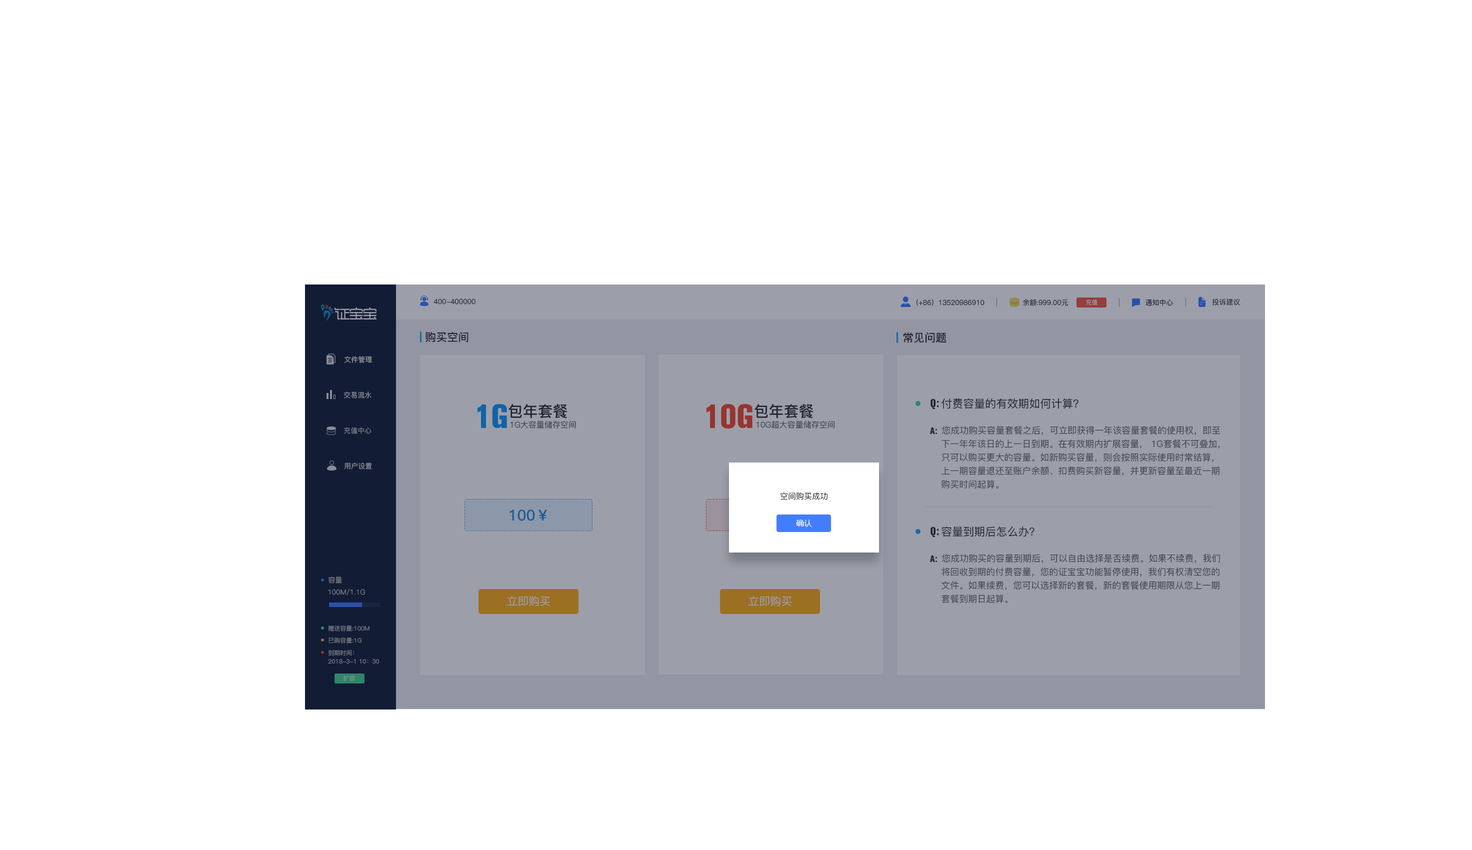
<style>
.page{position:relative;width:1472px;height:850px;background:#ffffff}
.page>*{position:absolute;margin:0}
.t1{font:7px "PingFang-SC-Medium";color:#232730}
.t2{font:6px "PingFang-SC-Medium";color:#9c9faa}
.t3{font:11px "PingFang-SC-Bold";color:#333333}
.t4{font:7px "PingFang-SC-Bold";color:#888b98}
.t5{font:7px "PingFang-SC-Medium";color:#898b98}
.t6{font:11.1px "AkzidenzGroteskBQ-XBdCnd";color:#333333}
.t7{font:11px "PingFang-SC-Medium";color:#333333}
.t8{font:32.9px "AkzidenzGroteskBQ-XBdCnd";color:#1263a5}
.t9{font:15px "PingFang-SC-Bold";color:#333333}
.t10{font:32.9px "AkzidenzGroteskBQ-XBdCnd";color:#98342f}
.t11{font:8px "PingFang-SC-Medium";color:#40434e}
.t12{font:7px "PingFang-SC-Medium";color:#777b89}
.t13{font:9px "AkzidenzGroteskBQ-XBdCnd";color:#333333}
.t14{font:9px "PingFang-SC-Medium";color:#40434e}
.t15{font:8px "PingFang-SC-Medium";color:#333333}
.t16{font:15px "PingFang-SC-Bold";color:#175b93}
.t17{font:8px "MicrosoftYaHei";color:#ffffff}
.t18{font:7px "PingFang-SC-Medium";color:#777a88}
.t19{font:11px "PingFang-SC-Medium";color:#9c9faa}
.t20{font:6px "PingFang-SC-Medium";color:#777a88}
.t21{font:6px "PingFang-SC-Medium"}
</style>
<div class="page">
<p class="t1" style="left:434px;top:298px;width:42px;height:6px">400-400000</p>
<p class="t1" style="left:916px;top:299px;width:68px;height:7px">（+86）13520986910</p>
<p class="t1" style="left:1022px;top:299px;width:46px;height:7px">余额:999.00元</p>
<p class="t2" style="left:1086px;top:300px;width:12px;height:6px">充值</p>
<p class="t1" style="left:1145px;top:299px;width:28px;height:7px">通知中心</p>
<p class="t1" style="left:1212px;top:298px;width:28px;height:8px">投诉建议</p>
<p class="t3" style="left:426px;top:332px;width:42px;height:10px">购买空间</p>
<p class="t3" style="left:903px;top:332px;width:43px;height:11px">常见问题</p>
<p class="t4" style="left:344px;top:356px;width:28px;height:7px">文件管理</p>
<p class="t5" style="left:344px;top:392px;width:28px;height:6px">交易流水</p>
<p class="t6" style="left:930px;top:399px;width:9px;height:10px">Q:</p>
<p class="t7" style="left:942px;top:398px;width:136px;height:11px">付费容量的有效期如何计算？</p>
<p class="t8" style="left:478px;top:404px;width:29px;height:24px">1G</p>
<p class="t9" style="left:508px;top:404px;width:60px;height:14px">包年套餐</p>
<p class="t10" style="left:706px;top:404px;width:46px;height:24px">10G</p>
<p class="t9" style="left:754px;top:404px;width:60px;height:14px">包年套餐</p>
<p class="t11" style="left:510px;top:420px;width:66px;height:8px">1G大容量储存空间</p>
<p class="t11" style="left:756px;top:420px;width:79px;height:8px">10G超大容量储存空间</p>
<p class="t12" style="left:344px;top:427px;width:28px;height:7px">充值中心</p>
<p class="t13" style="left:930px;top:428px;width:7px;height:6px">A:</p>
<p class="t14" style="left:942px;top:426px;width:278px;height:9px">您成功购买容量套餐之后，可立即获得一年该容量套餐的使用权，即至</p>
<p class="t14" style="left:942px;top:440px;width:278px;height:8px">下一年年该日的上一日到期。在有效期内扩展容量， 1G套餐不可叠加，</p>
<p class="t14" style="left:942px;top:453px;width:272px;height:9px">只可以购买更大的容量。如新购买容量，则会按照实际使用时常结算，</p>
<p class="t5" style="left:344px;top:462px;width:28px;height:8px">用户设置</p>
<p class="t14" style="left:942px;top:466px;width:278px;height:10px">上一期容量退还至账户余额、扣费购买新容量，并更新容量至最近一期</p>
<p class="t14" style="left:942px;top:480px;width:57px;height:9px">购买时间起算。</p>
<p class="t15" style="left:780px;top:492px;width:48px;height:8px">空间购买成功</p>
<p class="t16" style="left:510px;top:510px;width:38px;height:11px">100￥</p>
<p class="t17" style="left:796px;top:520px;width:16px;height:7px">确认</p>
<p class="t6" style="left:930px;top:527px;width:9px;height:10px">Q:</p>
<p class="t7" style="left:942px;top:526px;width:92px;height:11px">容量到期后怎么办？</p>
<p class="t13" style="left:930px;top:556px;width:7px;height:6px">A:</p>
<p class="t14" style="left:942px;top:554px;width:278px;height:9px">您成功购买的容量到期后，可以自由选择是否续费。如果不续费，我们</p>
<p class="t14" style="left:942px;top:568px;width:278px;height:8px">将回收到期的付费容量，您的证宝宝功能暂停使用，我们有权清空您的</p>
<p class="t18" style="left:328px;top:576px;width:14px;height:8px">容量</p>
<p class="t14" style="left:942px;top:581px;width:278px;height:9px">文件。如果续费，您可以选择新的套餐，新的套餐使用期限从您上一期</p>
<p class="t18" style="left:328px;top:588px;width:37px;height:8px">100M/1.1G</p>
<p class="t19" style="left:507px;top:596px;width:43px;height:10px">立即购买</p>
<p class="t19" style="left:748px;top:596px;width:44px;height:10px">立即购买</p>
<p class="t14" style="left:942px;top:594px;width:66px;height:10px">套餐到期日起算。</p>
<p class="t20" style="left:328px;top:626px;width:42px;height:6px">赠送容量:100M</p>
<p class="t20" style="left:328px;top:638px;width:34px;height:6px">已购容量:1G</p>
<p class="t20" style="left:328px;top:650px;width:26px;height:6px">到期时间：</p>
<p class="t20" style="left:328px;top:659px;width:52px;height:5px">2018-3-1 10：30</p>
<p class="t21" style="left:343px;top:676px;width:12px;height:6px">扩容</p>
</div>
